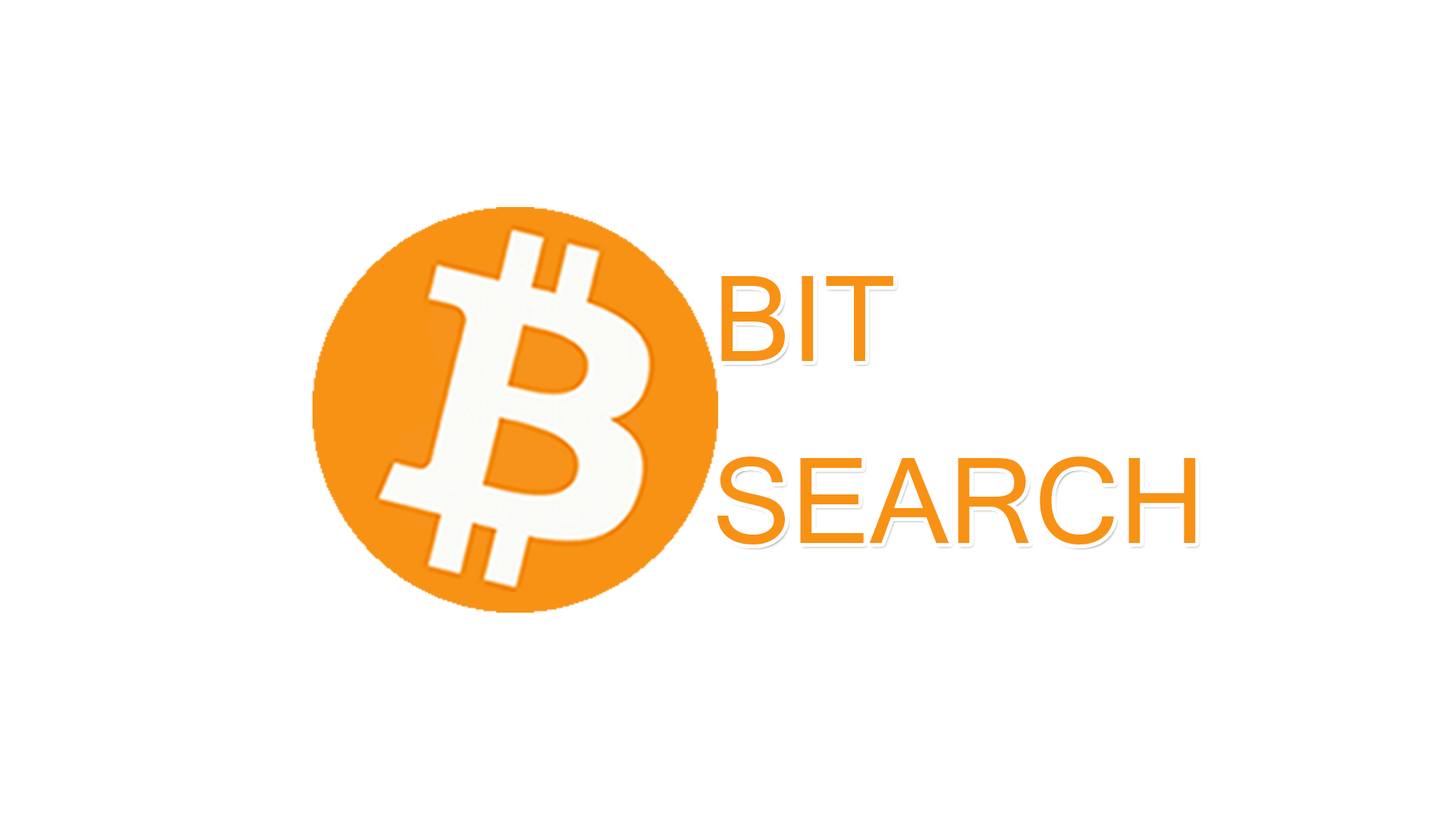
<style>
.page{position:relative;width:1456px;height:819px;background:#ffffff}
.page>*{position:absolute;margin:0}
.t1{font:151.7px "Tunga";color:#f79215}
</style>
<div class="page">
<p class="t1" style="left:717px;top:276px;width:479px;height:268px">BIT<br>SEARCH</p>
</div>
